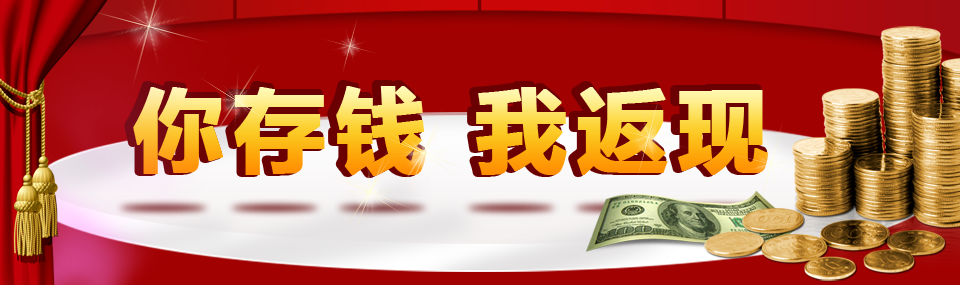
<style>
.page{position:relative;width:960px;height:285px}
.page>*{position:absolute;margin:0}
.t1{font:90px "MicrosoftYaHei-Bold";letter-spacing:0.1em;font-weight:bold}
</style>
<div class="page">
<p class="t1" style="left:133px;top:86px;width:636px;height:90px">你存钱 我返现</p>
</div>
